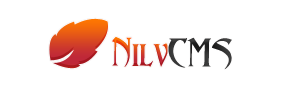
<style>
.page{position:relative;width:300px;height:100px;background:#ffffff}
.page>*{position:absolute;margin:0}
.t1{font:36px "Abaddon"}
.t2{font:36px "Abaddon";color:#363636}
</style>
<div class="page">
<p class="t1" style="left:112px;top:37px;width:57px;height:30px">Nilv</p>
<p class="t2" style="left:168px;top:37px;width:64px;height:33px">CMS</p>
</div>
